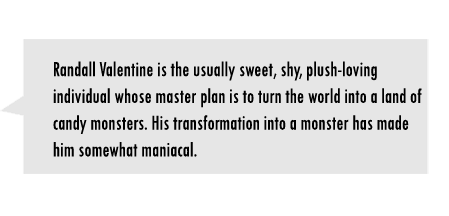
<style>
.page{position:relative;width:449px;height:216px;background:#e6e6e6}
.page>*{position:absolute;margin:0}
.t1{font:22.3px "TwCenMT-Condensed";color:#000000;scale:0.88 1}
</style>
<div class="page">
<p class="t1" style="left:53px;top:61px;width:369px;height:96px">Randall Valentine is the usually sweet, shy, plush-loving individual whose master plan is to turn the world into a land of candy monsters. His transformation into a monster has made him somewhat maniacal.</p>
</div>
